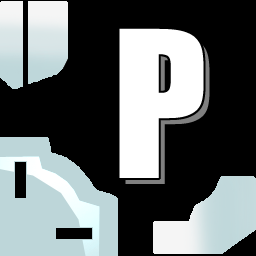
<style>
.page{position:relative;width:256px;height:256px;background:#000000}
.page>*{position:absolute;margin:0}
.t1{font:188.7px "Impact";color:#ffffff}
</style>
<div class="page">
<p class="t1" style="left:119px;top:28px;width:85px;height:150px">P</p>
</div>
